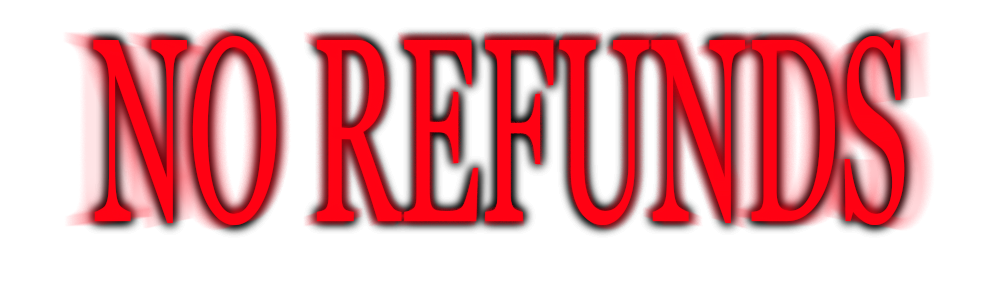
<style>
.page{position:relative;width:1000px;height:300px;background:#ffffff}
.page>*{position:absolute;margin:0}
.t1{font:260.9px "Georgia";color:#ff0113;scale:0.48 1}
</style>
<div class="page">
<p class="t1" style="left:93px;top:36px;width:812px;height:189px">NO REFUNDS</p>
</div>
